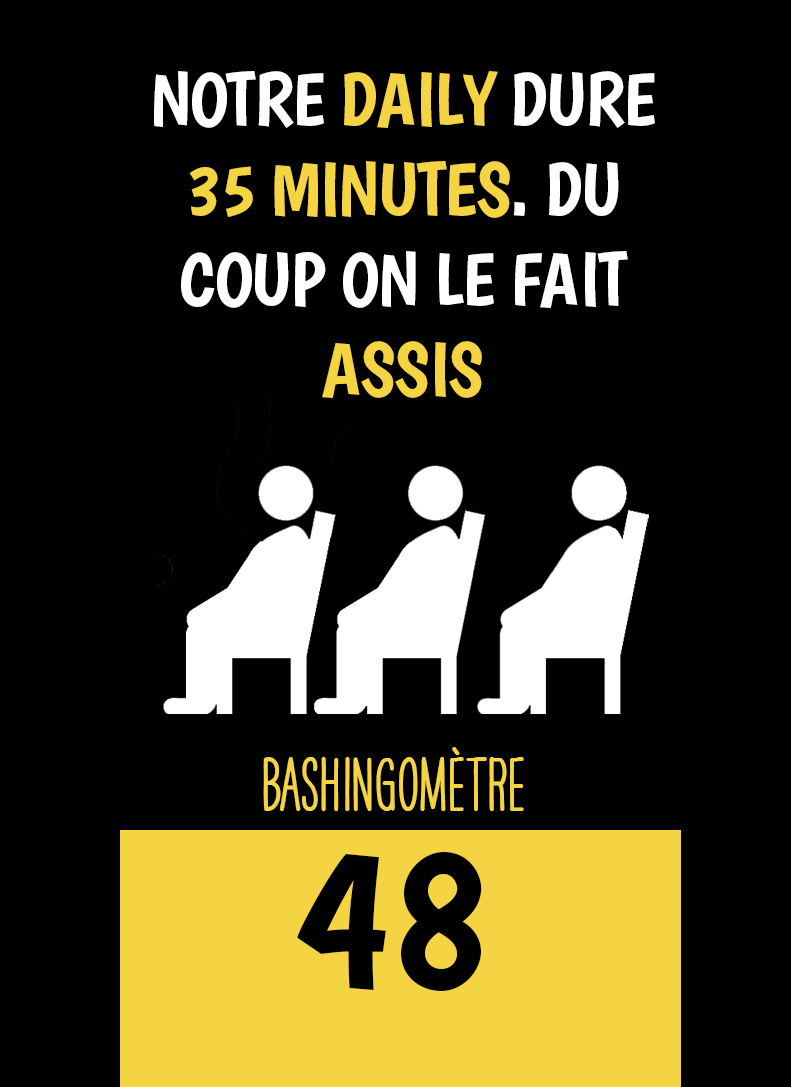
<style>
.page{position:relative;width:791px;height:1087px;background:#000000}
.page>*{position:absolute;margin:0}
.t1{font:75px "Boogaloo-Regular";letter-spacing:-0.02em;color:#ffffff}
.t2{font:75px "Boogaloo-Regular";letter-spacing:-0.02em;color:#f4d443}
.t3{font:66.7px "HAVEANICEDAYTallW04-Bold";color:#f4d443}
.t4{font:200px "Boogaloo-Regular";color:#000000}
</style>
<div class="page">
<p class="t1" style="left:154px;top:71px;width:501px;height:327px;text-align:center">NOTRE <span class="t2">DAILY </span>DURE <span class="t2">35 MINUTES</span>. DU COUP ON LE FAIT <span class="t2">ASSIS</span></p>
<p class="t3" style="left:263px;top:747px;width:261px;height:64px">BASHINgomètre</p>
<p class="t4" style="left:297px;top:852px;width:185px;height:139px">48</p>
</div>
